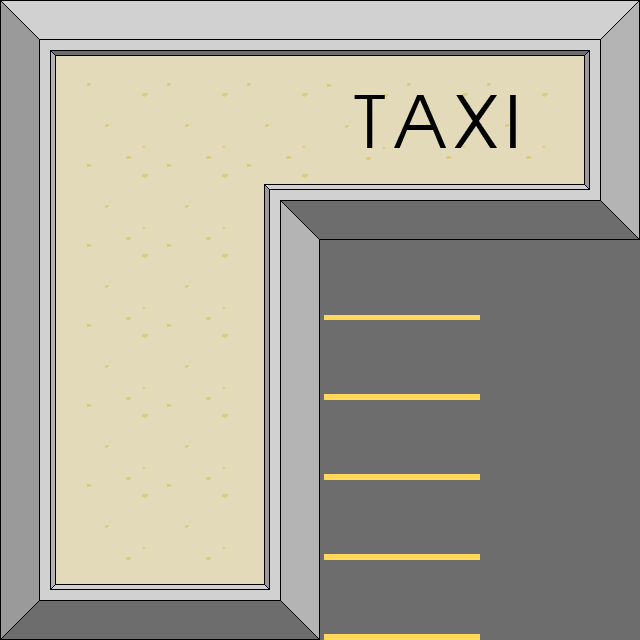
<style>
.page{position:relative;width:640px;height:640px;background:#6d6d6d}
.page>*{position:absolute;margin:0}
.t1{font:72px "AvanteNormal";letter-spacing:0.1em;color:#000000}
</style>
<div class="page">
<p class="t1" style="left:354px;top:95px;width:162px;height:53px">TAXI</p>
</div>
